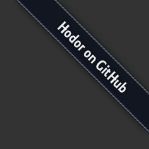
<style>
.page{position:relative;width:149px;height:149px;background:#333333}
.page>*{position:absolute;margin:0}
.t1{font:16px "Collegiate";color:#ffffff}
</style>
<div class="page">
<p class="t1" style="left:57px;top:21px;width:70px;height:72px;rotate:45deg">Hodor on GitHub</p>
</div>
